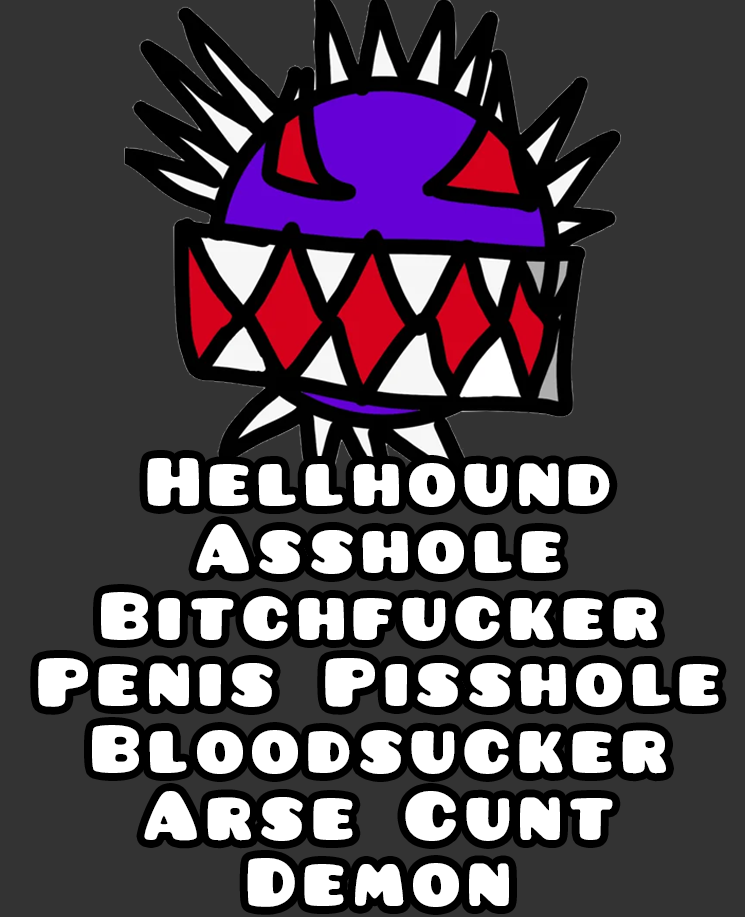
<style>
.page{position:relative;width:745px;height:917px;background:#333333}
.page>*{position:absolute;margin:0}
.t1{font:75px/66.7px "Pusab";letter-spacing:0.1em;color:#ffffff}
</style>
<div class="page">
<p class="t1" style="left:38px;top:458px;width:681px;height:449px;text-align:center">Hellhound<br>Asshole<br>Bitchfucker<br>Penis Pisshole<br>Bloodsucker<br>Arse Cunt<br>Demon</p>
</div>
